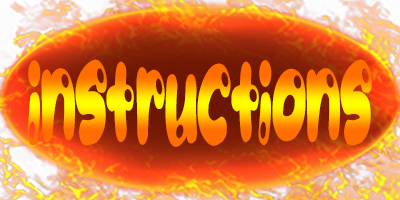
<style>
.page{position:relative;width:400px;height:200px}
.page>*{position:absolute;margin:0}
.t1{font:89.6px "JuicyFruity";scale:0.43 1}
</style>
<div class="page">
<p class="t1" style="left:27px;top:59px;width:345px;height:88px">instructions</p>
</div>
